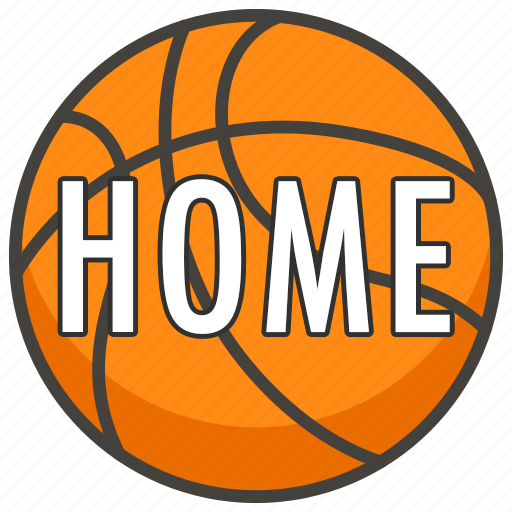
<style>
.page{position:relative;width:512px;height:512px;background:#ffffff}
.page>*{position:absolute;margin:0}
.t1{font:200px "Futura-CondensedMedium";letter-spacing:0.05em;color:#ffffff}
</style>
<div class="page">
<p class="t1" style="left:62px;top:179px;width:388px;height:155px">HOME</p>
</div>
